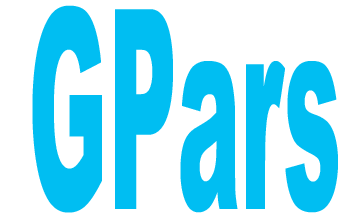
<style>
.page{position:relative;width:341px;height:224px;background:#ffffff}
.page>*{position:absolute;margin:0}
.t1{font:279px "Arial-Black";color:#00bef2;scale:0.34 1}
</style>
<div class="page">
<p class="t1" style="left:32px;top:5px;width:306px;height:208px">GPars</p>
</div>
